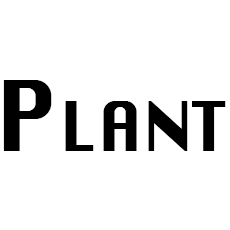
<style>
.page{position:relative;width:230px;height:230px;background:#ffffff}
.page>*{position:absolute;margin:0}
.t1{font:94.8px "Silom";color:#000000;font-variant:small-caps}
</style>
<div class="page">
<p class="t1" style="left:3px;top:80px;width:223px;height:71px">Plant</p>
</div>
